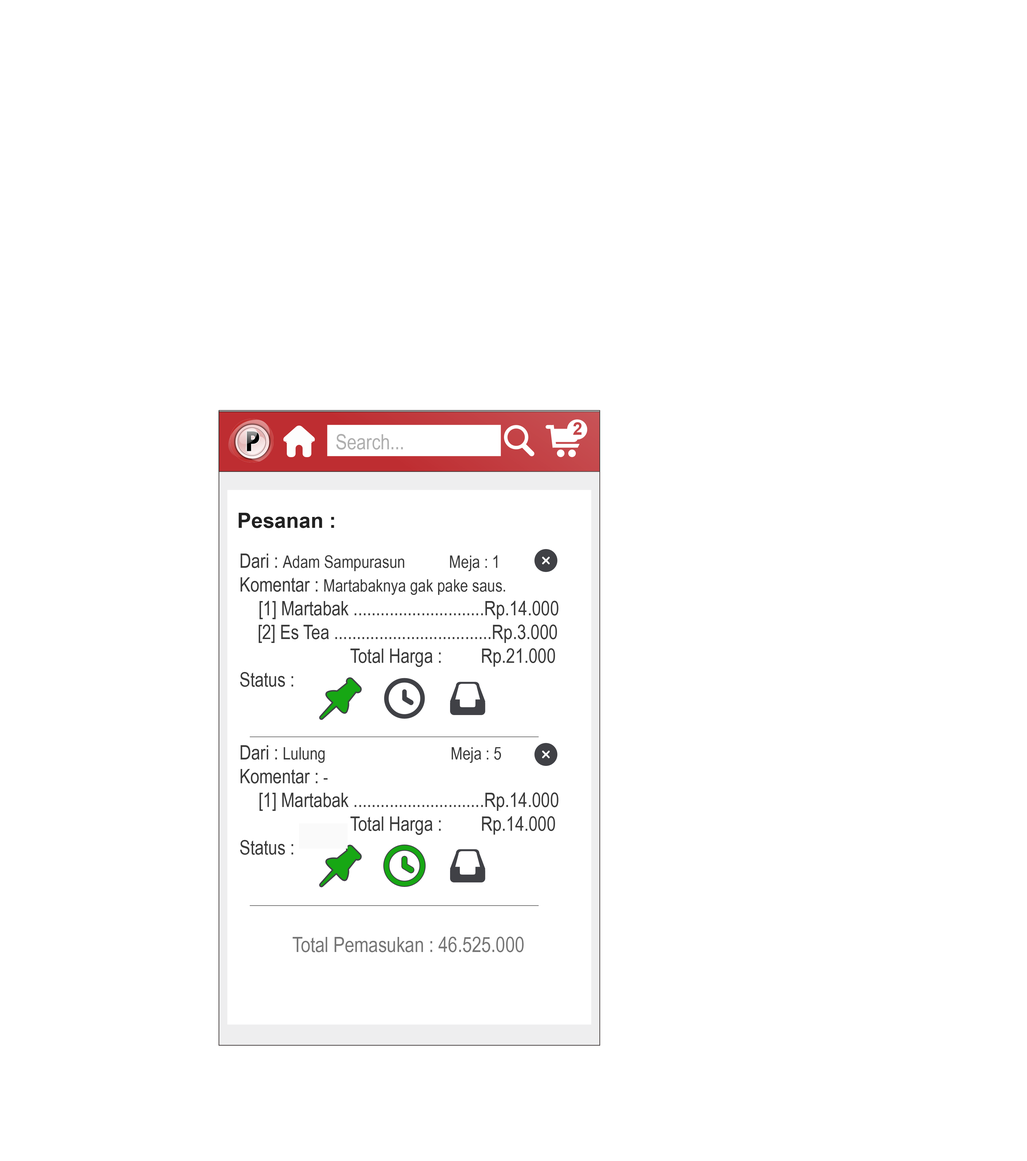
<style>
.page{position:relative;width:1027px;height:1161px;background:#ffffff}
.page>*{position:absolute;margin:0}
.t1{font:17.5px "Arial-BoldMT";color:#c44549}
.t2{font:21px "ArialNarrow";color:#afafaf}
.t3{font:21px "Arial-BoldMT";color:#212121}
.t4{font:19.8px "ArialNarrow";color:#3a3a3a}
.t5{font:17.5px "ArialNarrow";color:#3a3a3a}
.t6{font:21px "ArialNarrow";color:#767676}
</style>
<div class="page">
<p class="t1" style="left:573px;top:422px;width:9px;height:13px">2</p>
<p class="t2" style="left:336px;top:434px;width:67px;height:16px">Search...</p>
<p class="t3" style="left:239px;top:513px;width:95px;height:15px">Pesanan :</p>
<p class="t4" style="left:240px;top:554px;width:319px;height:133px">Dari : <span class="t5">Adam Sampurasun           Meja : 1<br></span>Komentar : <span class="t5">Martabaknya gak pake saus.</span><br>   [1] Martabak .............................Rp.14.000<br>    [2] Es Tea ...................................Rp.3.000<br>           Total Harga :    Rp.21.000 <br>Status :</p>
<p class="t4" style="left:240px;top:745px;width:319px;height:110px">Dari : <span class="t5">Lulung                      Meja : 5<br></span>Komentar : <span class="t5">-</span><br>   [1] Martabak .............................Rp.14.000<br>           Total Harga :    Rp.14.000 <br>Status :</p>
<p class="t6" style="left:293px;top:937px;width:231px;height:15px">Total Pemasukan : 46.525.000</p>
</div>
